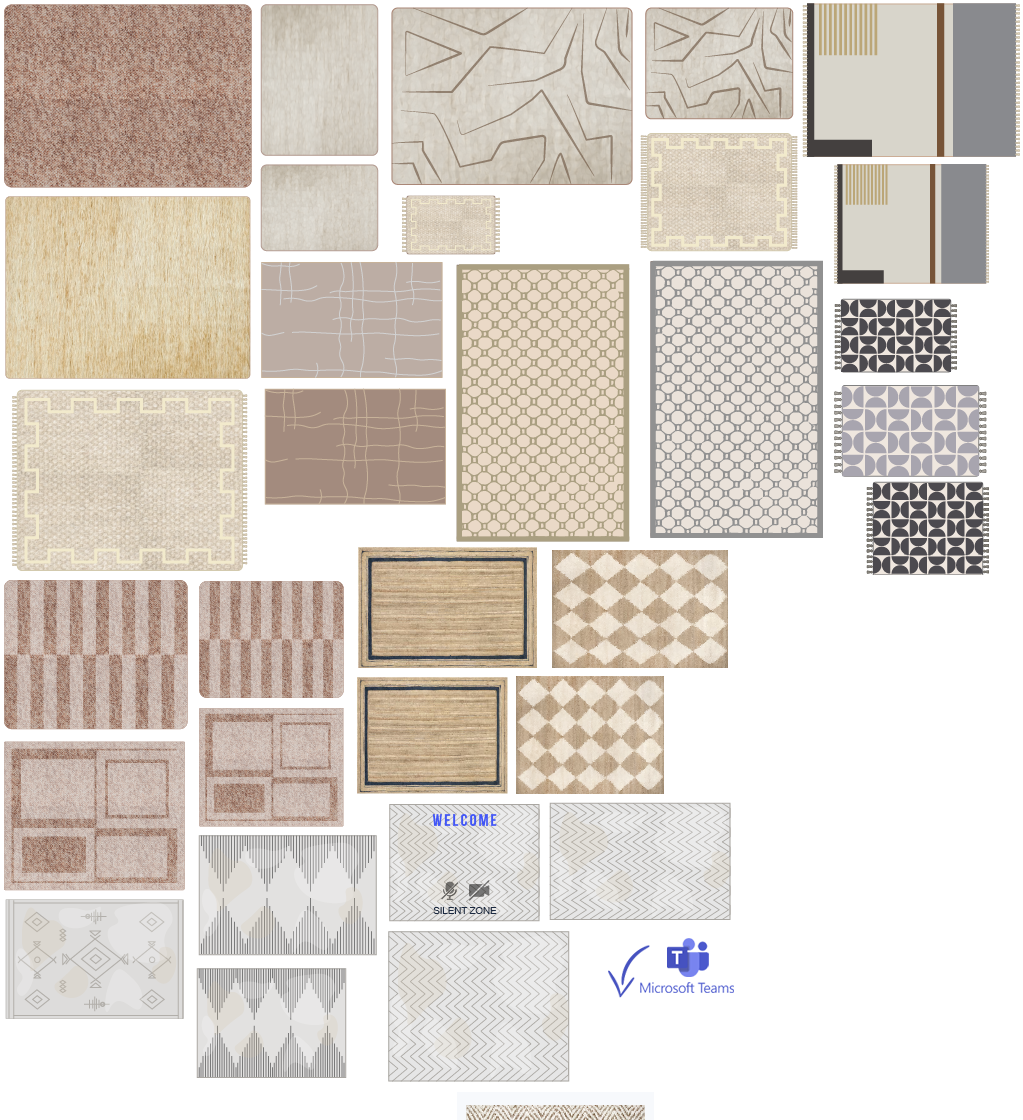
<style>
.page{position:relative;width:1023px;height:1120px;background:#ffffff}
.page>*{position:absolute;margin:0}
.t1{font:17px "BebasNeue";letter-spacing:0.14em;color:#4156f6}
.t2{font:10px "ArialMT";letter-spacing:-0.02em;color:#1b2a41;text-transform:uppercase}
</style>
<div class="page">
<p class="t1" style="left:432px;top:814px;width:65px;height:12px">WELCOME</p>
<p class="t2" style="left:433px;top:907px;width:64px;height:7px">Silent ZONE</p>
</div>
